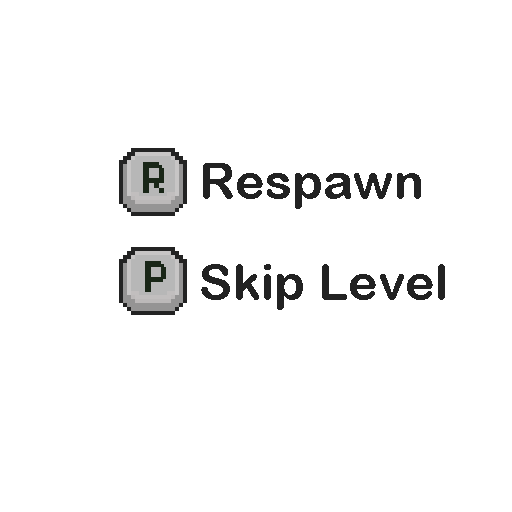
<style>
.page{position:relative;width:512px;height:512px;background:#ffffff}
.page>*{position:absolute;margin:0}
.t1{font:50px "ArialRoundedMTBold";color:#222222}
</style>
<div class="page">
<p class="t1" style="left:203px;top:163px;width:218px;height:46px">Respawn</p>
<p class="t1" style="left:201px;top:264px;width:244px;height:46px">Skip Level</p>
</div>
